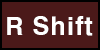
<style>
.page{position:relative;width:100px;height:50px;background:#4b1919}
.page>*{position:absolute;margin:0}
.t1{font:24px "H2gtrE";color:#ffffff}
</style>
<div class="page">
<p class="t1" style="left:7px;top:16px;width:86px;height:20px">R Shift</p>
</div>
